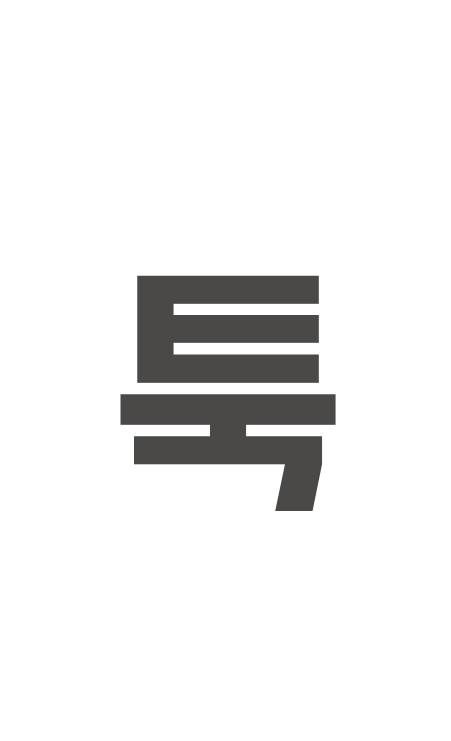
<style>
.page{position:relative;width:451px;height:741px;background:#ffffff}
.page>*{position:absolute;margin:0}
.t1{font:250px "BMDoHyeon-OTF";color:#4b4848}
</style>
<div class="page">
<p class="t1" style="left:120px;top:275px;width:216px;height:236px">툭</p>
</div>
